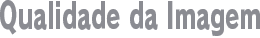
<style>
.page{position:relative;width:260px;height:38px;background:#ffffff}
.page>*{position:absolute;margin:0}
.t1{font:36px "RodinPro-EB";color:#8b8c92;scale:0.64 1}
</style>
<div class="page">
<p class="t1" style="left:0px;top:0px;width:260px;height:36px">Qualidade da Imagem</p>
</div>
